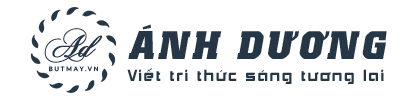
<style>
.page{position:relative;width:400px;height:100px;background:#ffffff}
.page>*{position:absolute;margin:0}
.t1{font:32.1px "ChopinScript";color:#253746;font-weight:bold;font-style:italic}
.t2{font:39.4px "UTM-Colossalis";letter-spacing:0.1em;color:#253746;font-style:italic}
.t3{font:6.1px "Lato-Regular";letter-spacing:0.3em;color:#253746}
.t4{font:15.5px "UTM-Akashi";letter-spacing:0.1em;color:#253746}
</style>
<div class="page">
<p class="t1" style="left:44px;top:28px;width:58px;height:35px">Ad</p>
<p class="t2" style="left:128px;top:24px;width:259px;height:35px">ÁNH DƯƠNG</p>
<p class="t3" style="left:49px;top:66px;width:49px;height:6px">BUTMAY.VN</p>
<p class="t4" style="left:127px;top:68px;width:257px;height:16px">Viết tri thức sáng tương lai</p>
</div>
